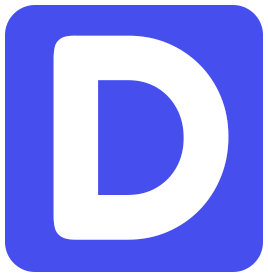
<style>
.page{position:relative;width:268px;height:277px;background:#464fee}
.page>*{position:absolute;margin:0}
.t1{font:291.7px "Fredoka-SemiBold";color:#ffffff}
</style>
<div class="page">
<p class="t1" style="left:53px;top:35px;width:176px;height:205px">D</p>
</div>
